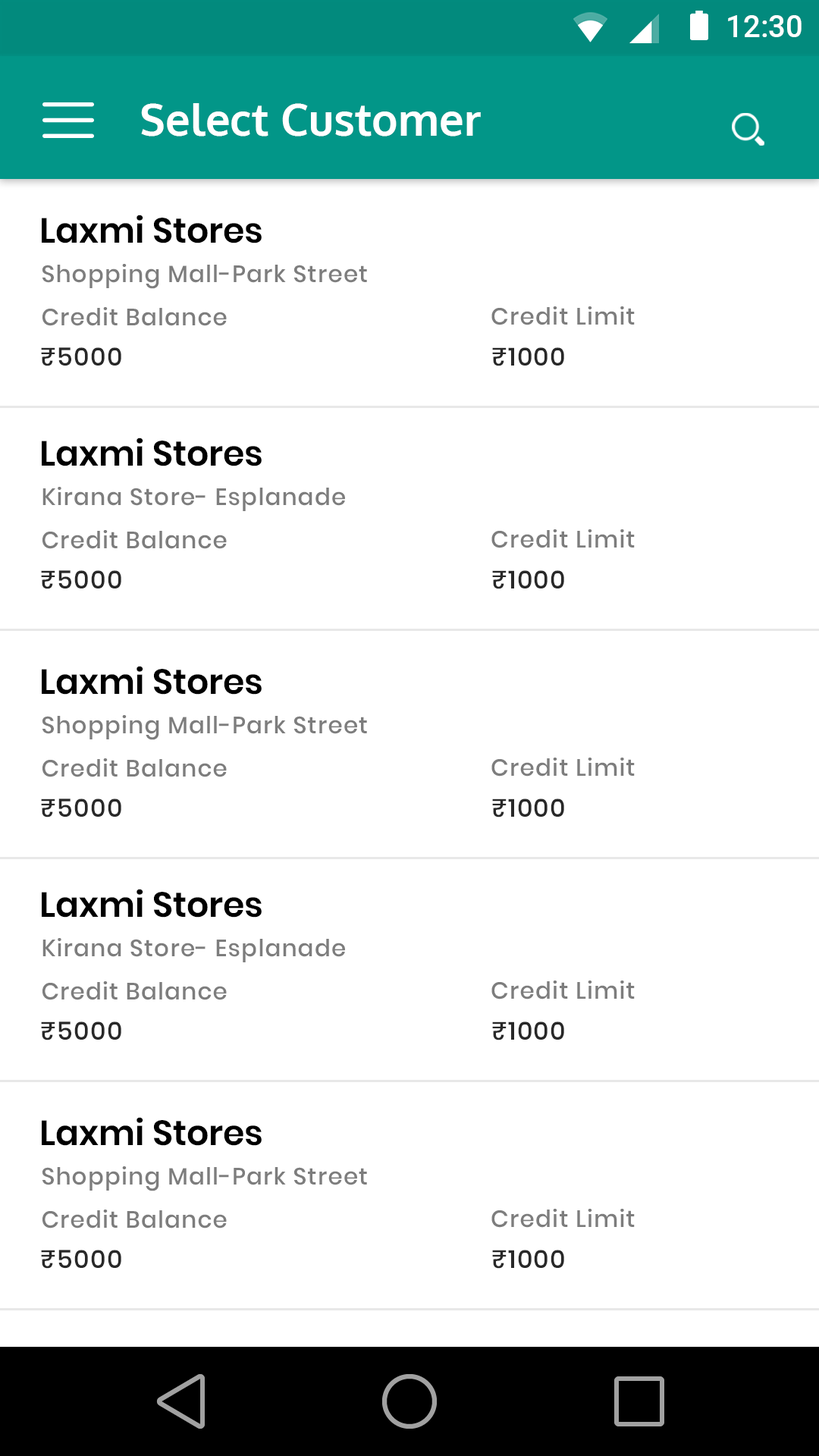
<style>
.page{position:relative;width:819px;height:1456px;background:#ffffff}
.page>*{position:absolute;margin:0}
.t1{font:31.2px "Roboto-Medium";color:#ffffff}
.t2{font:44px "Oxygen-Bold";color:#ffffff}
.t3{font:34.9px "Poppins-SemiBold";color:#000000}
.t4{font:23.5px "Poppins-Medium";letter-spacing:0.04em;color:#7d7d7d}
.t5{font:25px "Poppins-Medium";letter-spacing:0.04em;color:#282828}
</style>
<div class="page">
<p class="t1" style="left:728px;top:15px;width:74px;height:22px">12:30</p>
<p class="t2" style="left:141px;top:103px;width:340px;height:33px">Select Customer</p>
<p class="t3" style="left:42px;top:215px;width:220px;height:28px">Laxmi Stores</p>
<p class="t4" style="left:42px;top:264px;width:325px;height:25px">Shopping Mall-Park Street</p>
<p class="t4" style="left:42px;top:307px;width:185px;height:19px">Credit Balance</p>
<p class="t4" style="left:491px;top:306px;width:144px;height:19px">Credit Limit</p>
<p class="t5" style="left:41px;top:347px;width:80px;height:19px">₹5000</p>
<p class="t5" style="left:492px;top:347px;width:72px;height:19px">₹1000</p>
<p class="t3" style="left:42px;top:438px;width:220px;height:28px">Laxmi Stores</p>
<p class="t4" style="left:42px;top:487px;width:303px;height:24px">Kirana Store- Esplanade</p>
<p class="t4" style="left:42px;top:530px;width:185px;height:19px">Credit Balance</p>
<p class="t4" style="left:491px;top:529px;width:144px;height:19px">Credit Limit</p>
<p class="t5" style="left:41px;top:570px;width:80px;height:19px">₹5000</p>
<p class="t5" style="left:492px;top:570px;width:72px;height:19px">₹1000</p>
<p class="t3" style="left:42px;top:666px;width:220px;height:29px">Laxmi Stores</p>
<p class="t4" style="left:42px;top:715px;width:325px;height:25px">Shopping Mall-Park Street</p>
<p class="t4" style="left:42px;top:758px;width:185px;height:19px">Credit Balance</p>
<p class="t4" style="left:491px;top:758px;width:144px;height:19px">Credit Limit</p>
<p class="t5" style="left:41px;top:799px;width:80px;height:18px">₹5000</p>
<p class="t5" style="left:492px;top:799px;width:72px;height:18px">₹1000</p>
<p class="t3" style="left:42px;top:889px;width:220px;height:29px">Laxmi Stores</p>
<p class="t4" style="left:42px;top:938px;width:303px;height:24px">Kirana Store- Esplanade</p>
<p class="t4" style="left:42px;top:981px;width:185px;height:19px">Credit Balance</p>
<p class="t4" style="left:491px;top:981px;width:144px;height:18px">Credit Limit</p>
<p class="t5" style="left:41px;top:1021px;width:80px;height:19px">₹5000</p>
<p class="t5" style="left:492px;top:1021px;width:72px;height:19px">₹1000</p>
<p class="t3" style="left:42px;top:1117px;width:220px;height:29px">Laxmi Stores</p>
<p class="t4" style="left:42px;top:1166px;width:325px;height:25px">Shopping Mall-Park Street</p>
<p class="t4" style="left:42px;top:1210px;width:185px;height:18px">Credit Balance</p>
<p class="t4" style="left:491px;top:1209px;width:144px;height:19px">Credit Limit</p>
<p class="t5" style="left:41px;top:1250px;width:80px;height:19px">₹5000</p>
<p class="t5" style="left:492px;top:1250px;width:72px;height:19px">₹1000</p>
</div>
